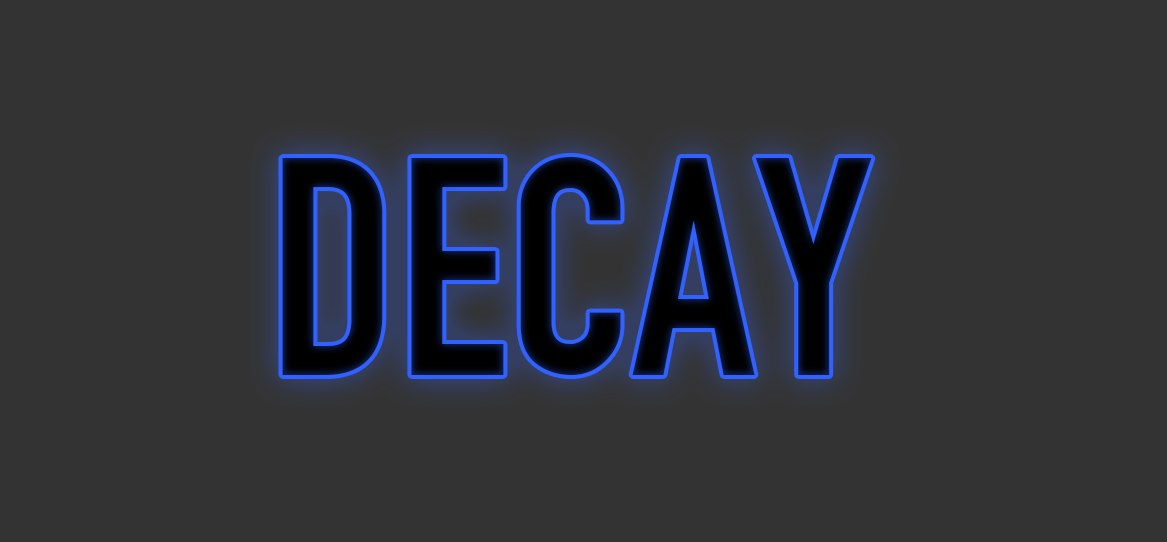
<style>
.page{position:relative;width:1167px;height:542px;background:#333333}
.page>*{position:absolute;margin:0}
.t1{font:302.5px "DINEngschrift";color:#010204}
</style>
<div class="page">
<p class="t1" style="left:282px;top:157px;width:590px;height:218px">DECAY</p>
</div>
